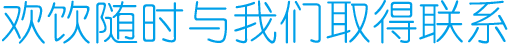
<style>
.page{position:relative;width:512px;height:45px;background:#ffffff}
.page>*{position:absolute;margin:0}
.t1{font:46px "YouYuan";letter-spacing:0.01em;color:#00a0e9}
</style>
<div class="page">
<p class="t1" style="left:2px;top:0px;width:506px;height:44px">欢饮随时与我们取得联系</p>
</div>
